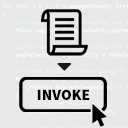
<style>
.page{position:relative;width:128px;height:128px;background:#e8e8e8}
.page>*{position:absolute;margin:0}
.t1{font:15.5px "SourceSansPro-Black";color:#000000}
</style>
<div class="page">
<p class="t1" style="left:37px;top:89px;width:53px;height:11px">INVOKE</p>
</div>
